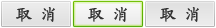
<style>
.page{position:relative;width:216px;height:28px}
.page>*{position:absolute;margin:0}
.t1{font:16px "KaiTi_GB2312";color:#323232;text-transform:uppercase;font-weight:bold}
</style>
<div class="page">
<p class="t1" style="left:16px;top:7px;width:39px;height:15px">取 消</p>
<p class="t1" style="left:88px;top:7px;width:39px;height:15px">取 消</p>
<p class="t1" style="left:160px;top:7px;width:39px;height:15px">取 消</p>
</div>
